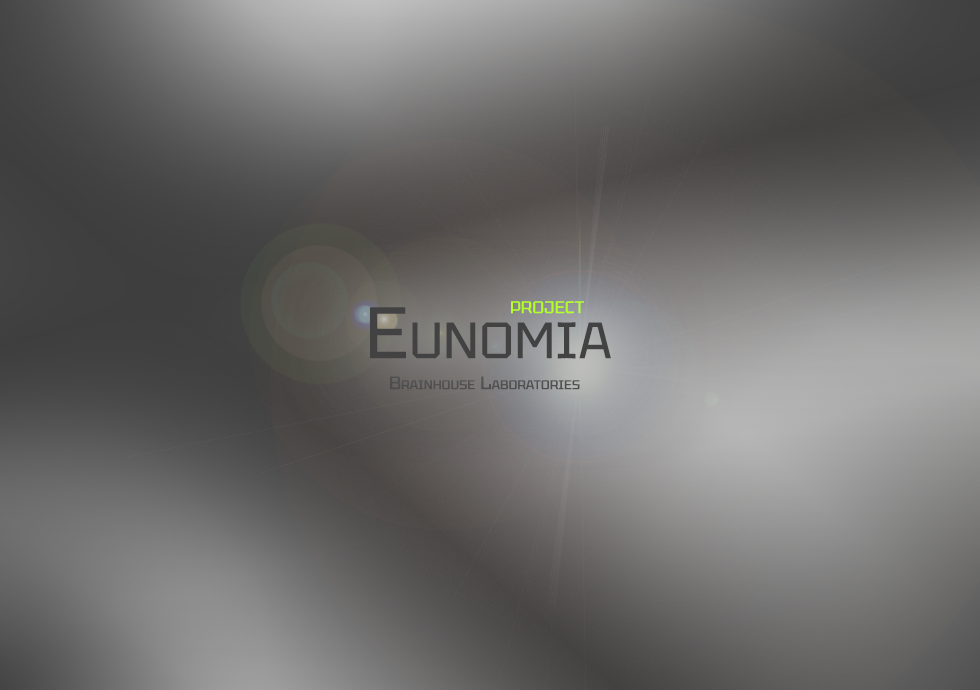
<style>
.page{position:relative;width:980px;height:690px}
.page>*{position:absolute;margin:0}
.t1{font:24px "Tektur-Regular";color:#b3ff26;font-variant:small-caps;font-weight:bold}
.t2{font:72px "Tektur-Regular";color:#424242;font-variant:small-caps;font-weight:bold}
.t3{font:18px "Tektur-Regular";color:#505050;font-variant:small-caps;font-weight:bold}
</style>
<div class="page">
<p class="t1" style="left:511px;top:301px;width:73px;height:13px">project</p>
<p class="t2" style="left:370px;top:307px;width:241px;height:52px">Eunomia</p>
<p class="t3" style="left:390px;top:376px;width:190px;height:14px">Brainhouse Laboratories</p>
</div>
